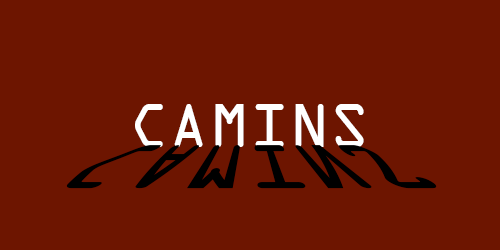
<style>
.page{position:relative;width:500px;height:250px;background:#6d1500}
.page>*{position:absolute;margin:0}
.t1{font:66.7px "OCRAExtended";color:#ffffff}
.t2{font:66.7px "OCRAExtended";color:#000000;scale:1.23 1}
</style>
<div class="page">
<p class="t1" style="left:135px;top:104px;width:229px;height:43px">CAMINSV</p>
<p class="t2" style="left:66px;top:145px;width:371px;height:44px">CAMINSV</p>
</div>
